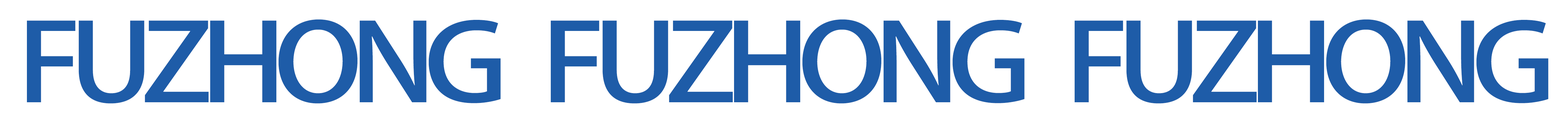
<style>
.page{position:relative;width:1568px;height:127px;background:#ffffff}
.page>*{position:absolute;margin:0}
.t1{font:106.1px "AdobeHeitiStd-Regular";letter-spacing:-0.1em;color:#1e5ca8;scale:1.15 1}
</style>
<div class="page">
<p class="t1" style="left:27px;top:19px;width:1522px;height:84px">FUZHONG   FUZHONG   FUZHONG</p>
</div>
